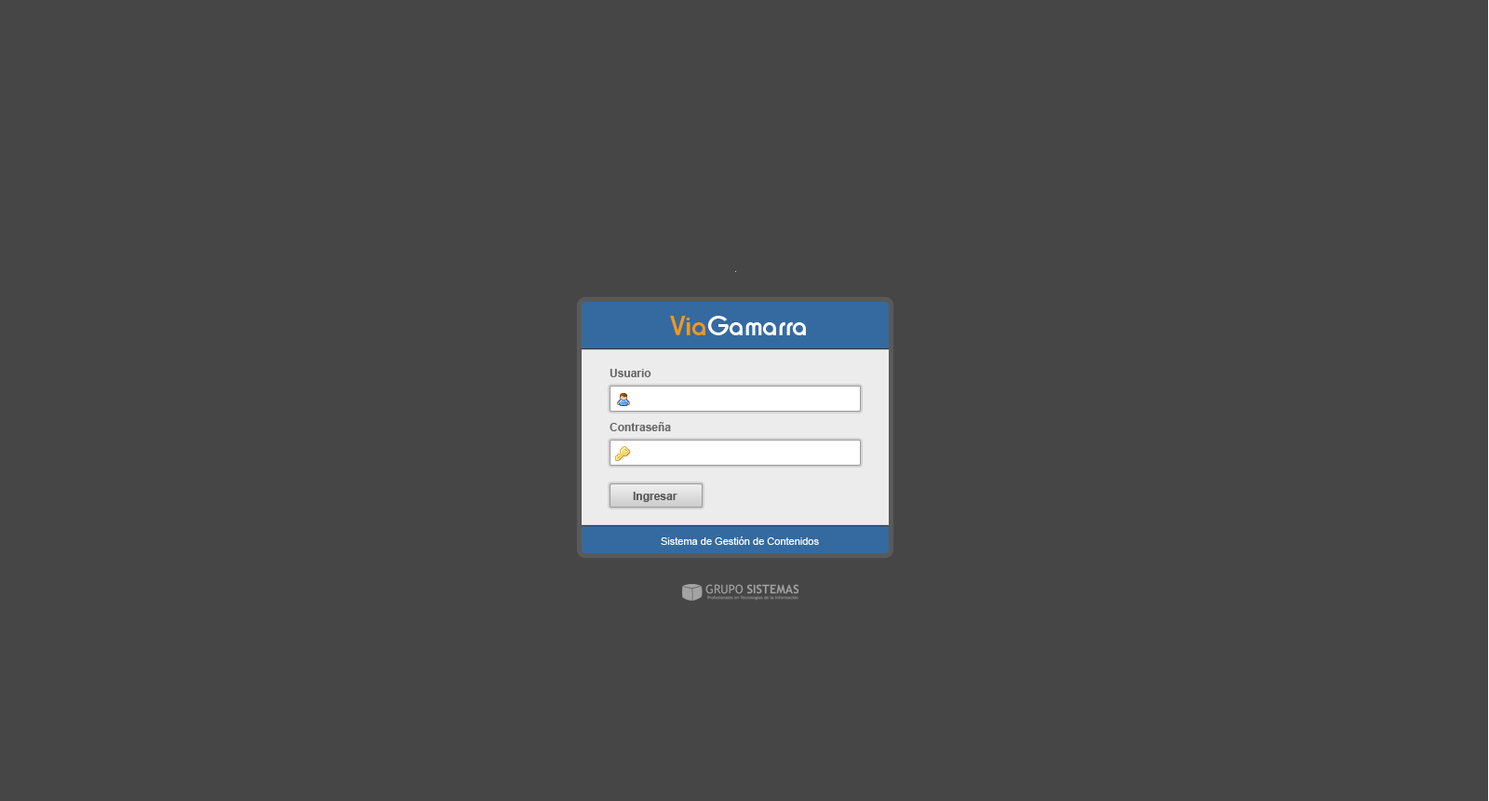
<style>
.page{position:relative;width:1489px;height:801px;background:#464646}
.page>*{position:absolute;margin:0}
.t1{font:11.2px "Arial-BoldMT";color:#666666}
.t2{font:11.2px "Arial-BoldMT";color:#555555}
.t3{font:10.2px "ArialMT";color:#ffffff}
</style>
<div class="page">
<p class="t1" style="left:610px;top:369px;width:61px;height:62px">Usuario<br><br><br><br>Contraseña</p>
<p class="t2" style="left:633px;top:492px;width:45px;height:10px">Ingresar</p>
<p class="t3" style="left:661px;top:536px;width:158px;height:9px">Sistema de Gestión de Contenidos</p>
</div>
